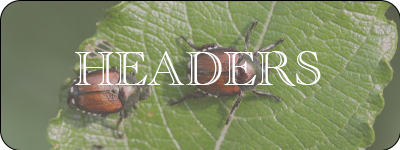
<style>
.page{position:relative;width:400px;height:150px}
.page>*{position:absolute;margin:0}
.t1{font:50px "AcademyEngravedLetPlain";color:#ffffff}
</style>
<div class="page">
<p class="t1" style="left:75px;top:51px;width:246px;height:35px">HEADERS</p>
</div>
